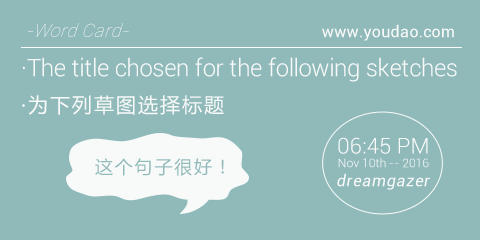
<style>
.page{position:relative;width:480px;height:240px;background:#90bab9}
.page>*{position:absolute;margin:0}
.t1{font:18px "Roboto-ThinItalic";letter-spacing:0.025em;color:#f8fafa;font-style:italic}
.t2{font:16px "Roboto-Regular";letter-spacing:0.025em;color:#f8fafa}
.t3{font:24px "Roboto-Light";letter-spacing:-0.005em;color:#f8fafa}
.t4{font:20px "MicrosoftYaHei";letter-spacing:0.1em;color:#f8fafa}
.t5{font:12.3px/13.7px "Roboto-Light";letter-spacing:-0.01em;color:#f8fafa}
.t6{font:22px/13.7px "Roboto-Light";color:#f8fafa}
.t7{font:18px "MicrosoftYaHei";letter-spacing:0.1em;color:#90bab9}
.t8{font:16px "Roboto-Regular";letter-spacing:0.05em;color:#f8fafa;font-style:italic}
</style>
<div class="page">
<p class="t1" style="left:28px;top:23px;width:101px;height:14px">-Word Card-</p>
<p class="t2" style="left:322px;top:24px;width:132px;height:17px">www.youdao.com</p>
<p class="t3" style="left:23px;top:57px;width:434px;height:25px">·The title chosen for the following sketches</p>
<p class="t4" style="left:22px;top:95px;width:202px;height:20px">·为下列草图选择标题</p>
<p class="t5" style="left:338px;top:137px;width:91px;height:31px;text-align:center"><span class="t6">06:45 PM<br></span>Nov 10th -- 2016</p>
<p class="t7" style="left:95px;top:158px;width:129px;height:18px">这个句子很好！</p>
<p class="t8" style="left:337px;top:173px;width:93px;height:17px">dreamgazer</p>
</div>
